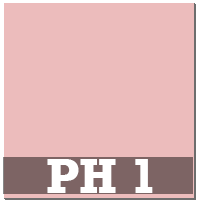
<style>
.page{position:relative;width:199px;height:201px;background:#ecbcbc}
.page>*{position:absolute;margin:0}
.t1{font:50px "Rockwell-Bold";color:#ffffff}
</style>
<div class="page">
<p class="t1" style="left:47px;top:159px;width:106px;height:34px">PH 1</p>
</div>
